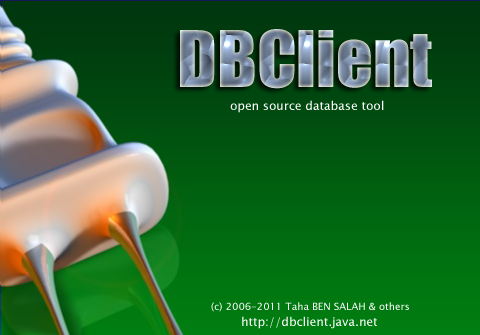
<style>
.page{position:relative;width:480px;height:335px}
.page>*{position:absolute;margin:0}
.t1{font:72px "Impact"}
.t2{font:12px "LucidaSansUnicode";color:#ffffff}
.t3{font:10px "LucidaSansUnicode";color:#ffffff}
</style>
<div class="page">
<p class="t1" style="left:180px;top:29px;width:252px;height:60px">DBClient</p>
<p class="t2" style="left:230px;top:100px;width:154px;height:13px">open source database tool</p>
<p class="t3" style="left:211px;top:302px;width:198px;height:10px">(c) 2006-2011 Taha BEN SALAH &amp; others</p>
<p class="t2" style="left:242px;top:316px;width:135px;height:13px">http://dbclient.java.net</p>
</div>
